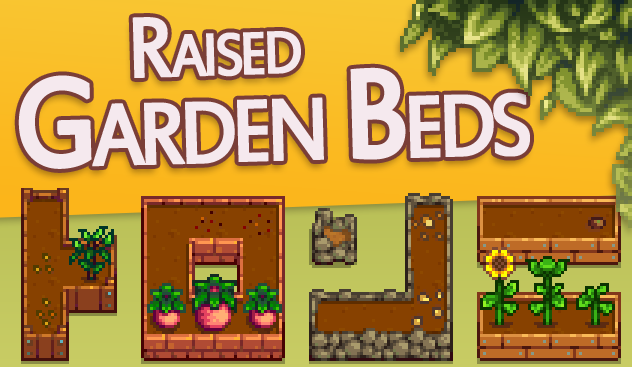
<style>
.page{position:relative;width:632px;height:367px}
.page>*{position:absolute;margin:0}
.t1{font:94px "EstrangeloEdessa";letter-spacing:-0.075em;color:#f5e9ee;font-variant:small-caps;font-weight:bold;scale:0.9 1}
.t2{font:138px "EstrangeloEdessa";letter-spacing:-0.075em;color:#f5e9ee;font-variant:small-caps;font-weight:bold;scale:0.9 1}
</style>
<div class="page">
<p class="t1" style="left:132px;top:17px;width:169px;height:61px;rotate:-2deg">Raised</p>
<p class="t2" style="left:18px;top:67px;width:512px;height:102px;rotate:-2deg">Garden Beds</p>
</div>
